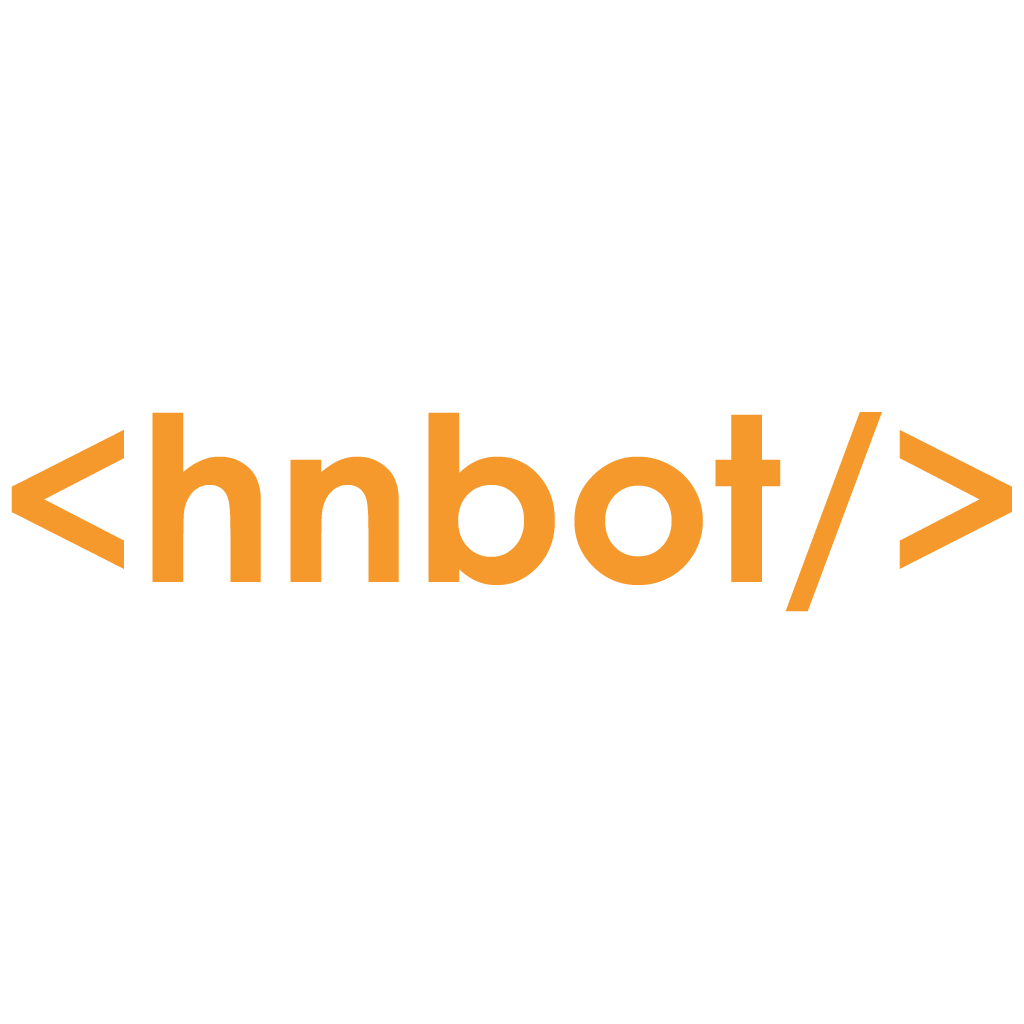
<style>
.page{position:relative;width:1024px;height:1024px;background:#ffffff}
.page>*{position:absolute;margin:0}
.t1{font:230px "CenturyGothic-Bold";color:#f6992c}
</style>
<div class="page">
<p class="t1" style="left:11px;top:412px;width:1001px;height:200px">&lt;hnbot/&gt;</p>
</div>
